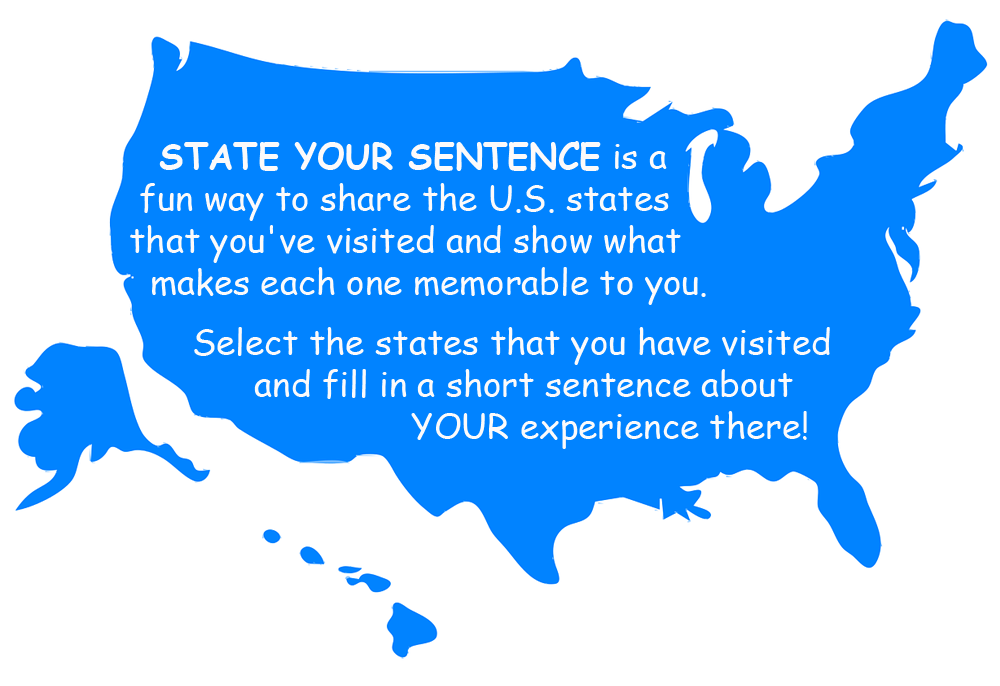
<style>
.page{position:relative;width:1000px;height:686px;background:#ffffff}
.page>*{position:absolute;margin:0}
.t1{font:35px "ComicSansMS";color:#fcfafa}
.t2{font:35px "ComicSansMS-Bold";color:#fcfafa}
</style>
<div class="page">
<p class="t1" style="left:130px;top:141px;width:700px;height:308px"><span class="t2">  STATE YOUR SENTENCE</span> is a <br> fun way to share the U.S. states <br>that you've visited and show what <br>  makes each one memorable to you. <br><br>      Select the states that you have visited <br>            and fill in a short sentence about <br>                           YOUR experience there!</p>
</div>
